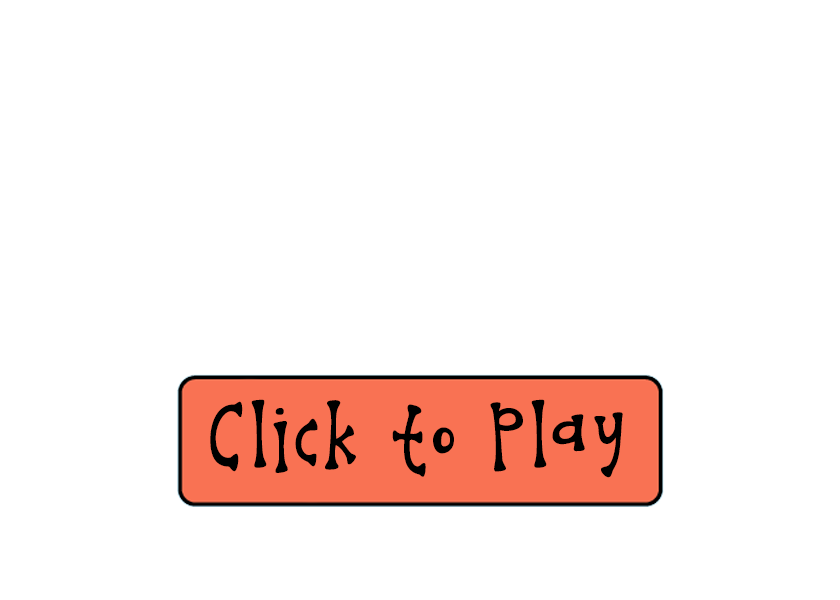
<style>
.page{position:relative;width:840px;height:600px;background:#ffffff}
.page>*{position:absolute;margin:0}
.t1{font:81.1px "KGMelonheadz";letter-spacing:0.08em;color:#000000;scale:0.92 1}
</style>
<div class="page">
<p class="t1" style="left:210px;top:399px;width:413px;height:79px">Click to Play</p>
</div>
